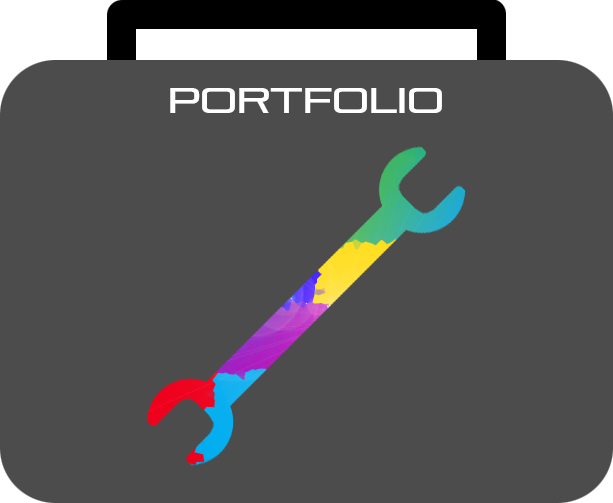
<style>
.page{position:relative;width:613px;height:503px;background:#4c4c4c}
.page>*{position:absolute;margin:0}
.t1{font:36px "PirulenRg-Regular";color:#ffffff}
</style>
<div class="page">
<p class="t1" style="left:170px;top:88px;width:272px;height:25px">Portfolio</p>
</div>
